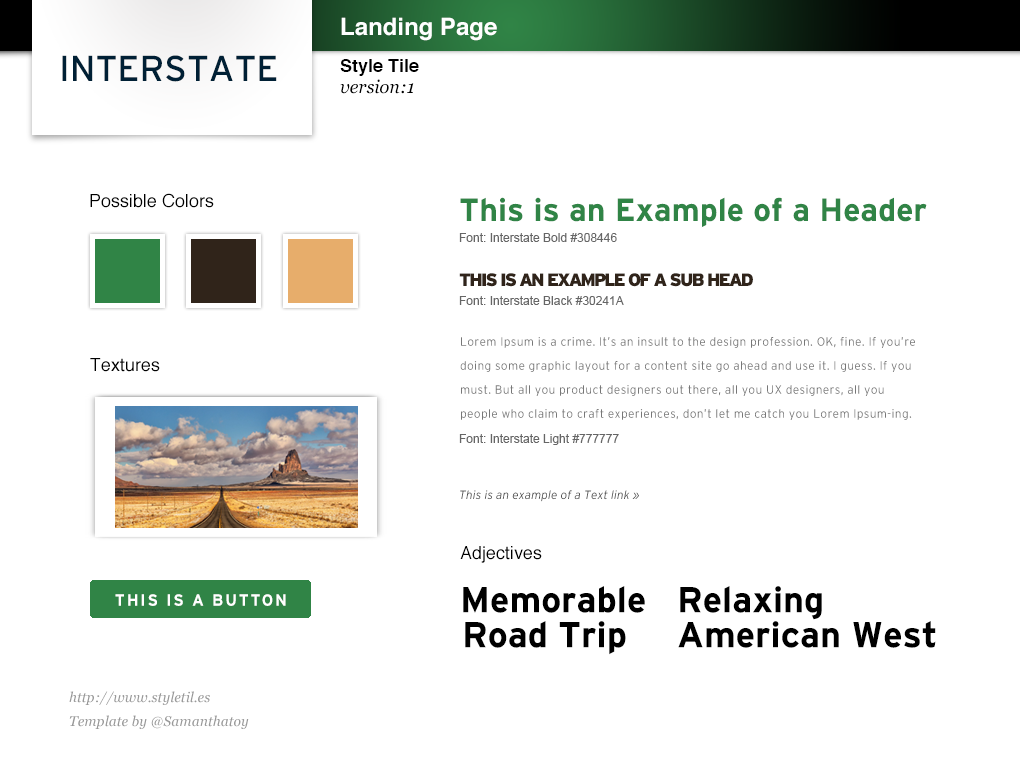
<style>
.page{position:relative;width:1020px;height:760px;background:#ffffff}
.page>*{position:absolute;margin:0}
.t1{font:24px "Helvetica-Bold";color:#ffffff}
.t2{font:36px "Interstate-Regular";color:#002035}
.t3{font:18px "Helvetica-Bold";color:#000000}
.t4{font:18px "Georgia-Italic";color:#000000}
.t5{font:18px "Helvetica";color:#000000}
.t6{font:32px "Interstate-Bold";color:#308446}
.t7{font:12px "ArialMT";color:#666666}
.t8{font:18px "Interstate-Black";letter-spacing:-0.1em;color:#30241a}
.t9{font:12px/24px "Interstate-Light";letter-spacing:0.025em;color:#777777}
.t10{font:12px "Interstate-LightItalic";color:#4d4d4d}
.t11{font:36px "Interstate-Bold";color:#000000}
.t12{font:16.3px "Interstate-Bold";letter-spacing:0.11em;color:#ffffff}
.t13{font:14px/24px "Georgia-Italic";color:#999999}
</style>
<div class="page">
<p class="t1" style="left:341px;top:17px;width:156px;height:24px">Landing Page</p>
<p class="t2" style="left:62px;top:55px;width:215px;height:27px">INTERSTATE</p>
<p class="t3" style="left:340px;top:59px;width:79px;height:17px">Style Tile</p>
<p class="t4" style="left:340px;top:79px;width:74px;height:15px">version:1</p>
<p class="t5" style="left:90px;top:193px;width:124px;height:15px">Possible Colors</p>
<p class="t6" style="left:460px;top:197px;width:467px;height:31px">This is an Example of a Header</p>
<p class="t7" style="left:459px;top:233px;width:158px;height:9px">Font: Interstate Bold #308446</p>
<p class="t8" style="left:459px;top:273px;width:294px;height:14px">THIS IS AN EXAMPLE OF A SUB HEAD</p>
<p class="t7" style="left:459px;top:296px;width:165px;height:9px">Font: Interstate Black #30241A</p>
<p class="t9" style="left:460px;top:337px;width:455px;height:83px">Lorem Ipsum is a crime. It’s an insult to the design profession. OK, fine. If you’re doing some graphic layout for a content site go ahead and use it. I guess. If you must. But all you product designers out there, all you UX designers, all you people who claim to craft experiences, don’t let me catch you Lorem Ipsum-ing.<br><br>v</p>
<p class="t5" style="left:90px;top:358px;width:70px;height:14px">Textures</p>
<p class="t7" style="left:459px;top:434px;width:160px;height:11px">Font: Interstate Light #777777</p>
<p class="t10" style="left:460px;top:490px;width:179px;height:12px">This is an example of a Text link »</p>
<p class="t5" style="left:460px;top:546px;width:82px;height:17px">Adjectives</p>
<p class="t11" style="left:463px;top:586px;width:182px;height:27px">Memorable</p>
<p class="t11" style="left:680px;top:586px;width:142px;height:34px">Relaxing</p>
<p class="t12" style="left:115px;top:594px;width:171px;height:12px">THIS IS A BUTTON</p>
<p class="t11" style="left:465px;top:621px;width:161px;height:34px">Road Trip</p>
<p class="t11" style="left:678px;top:621px;width:258px;height:27px">American West</p>
<p class="t13" style="left:69px;top:691px;width:180px;height:38px">http://www.styletil.es<br>Template by @Samanthatoy</p>
</div>
